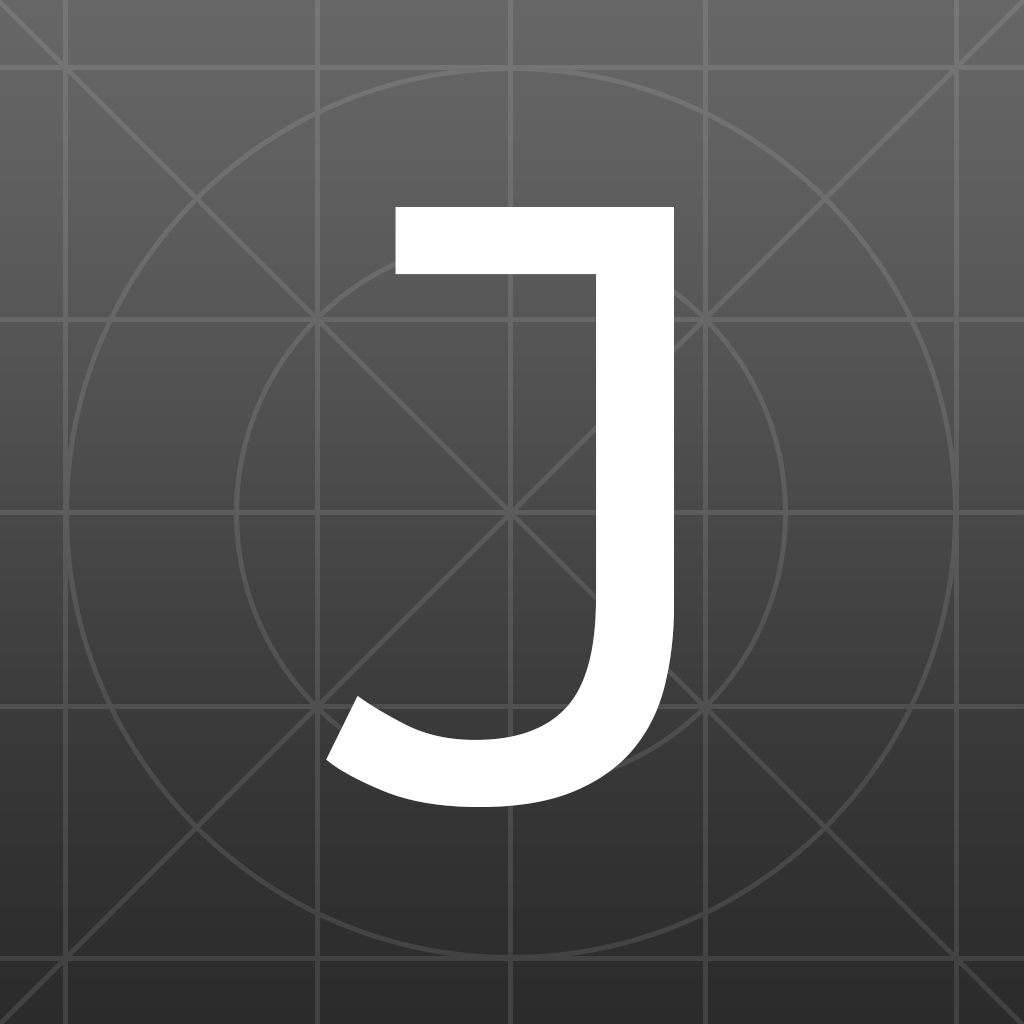
<style>
.page{position:relative;width:1024px;height:1024px}
.page>*{position:absolute;margin:0}
.t1{font:950px "UbuntuMono-Regular";color:#ffffff}
</style>
<div class="page">
<p class="t1" style="left:326px;top:207px;width:348px;height:600px">J</p>
</div>
